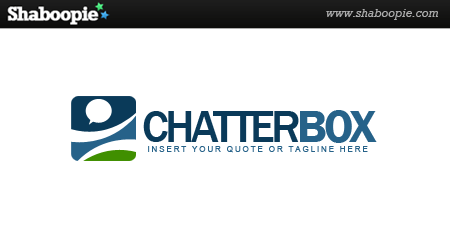
<style>
.page{position:relative;width:450px;height:250px;background:#ffffff}
.page>*{position:absolute;margin:0}
.t1{font:45.8px "FranklinGothic-Medium";letter-spacing:-0.075em;color:#0a3a59}
.t2{font:45.8px "FranklinGothic-Demi";letter-spacing:-0.075em;color:#266289}
.t3{font:8.3px "ArialMT";letter-spacing:0.2em;color:#266289}
</style>
<div class="page">
<p class="t1" style="left:143px;top:110px;width:234px;height:33px">CHATTER<span class="t2">BOX</span></p>
<p class="t3" style="left:148px;top:146px;width:220px;height:7px">INSERT YOUR QUOTE OR TAGLINE HERE</p>
</div>
